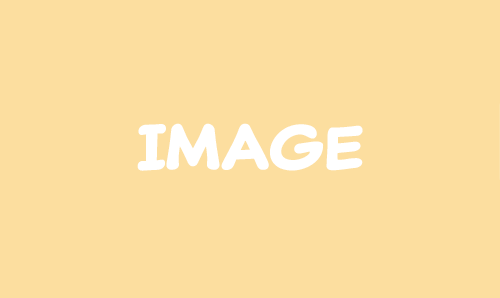
<style>
.page{position:relative;width:500px;height:298px;background:#fcde9f}
.page>*{position:absolute;margin:0}
.t1{font:64.1px "ClassicComic-Bold";color:#ffffff}
</style>
<div class="page">
<p class="t1" style="left:137px;top:123px;width:226px;height:48px">Image</p>
</div>
